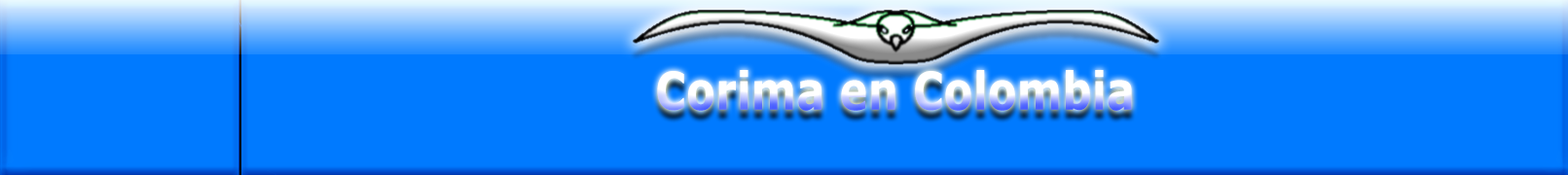
<style>
.page{position:relative;width:1568px;height:175px;background:#007aff}
.page>*{position:absolute;margin:0}
.t1{font:52px "Verdana-Bold";scale:0.82 1}
</style>
<div class="page">
<p class="t1" style="left:657px;top:70px;width:475px;height:41px">Corima en Colombia</p>
</div>
